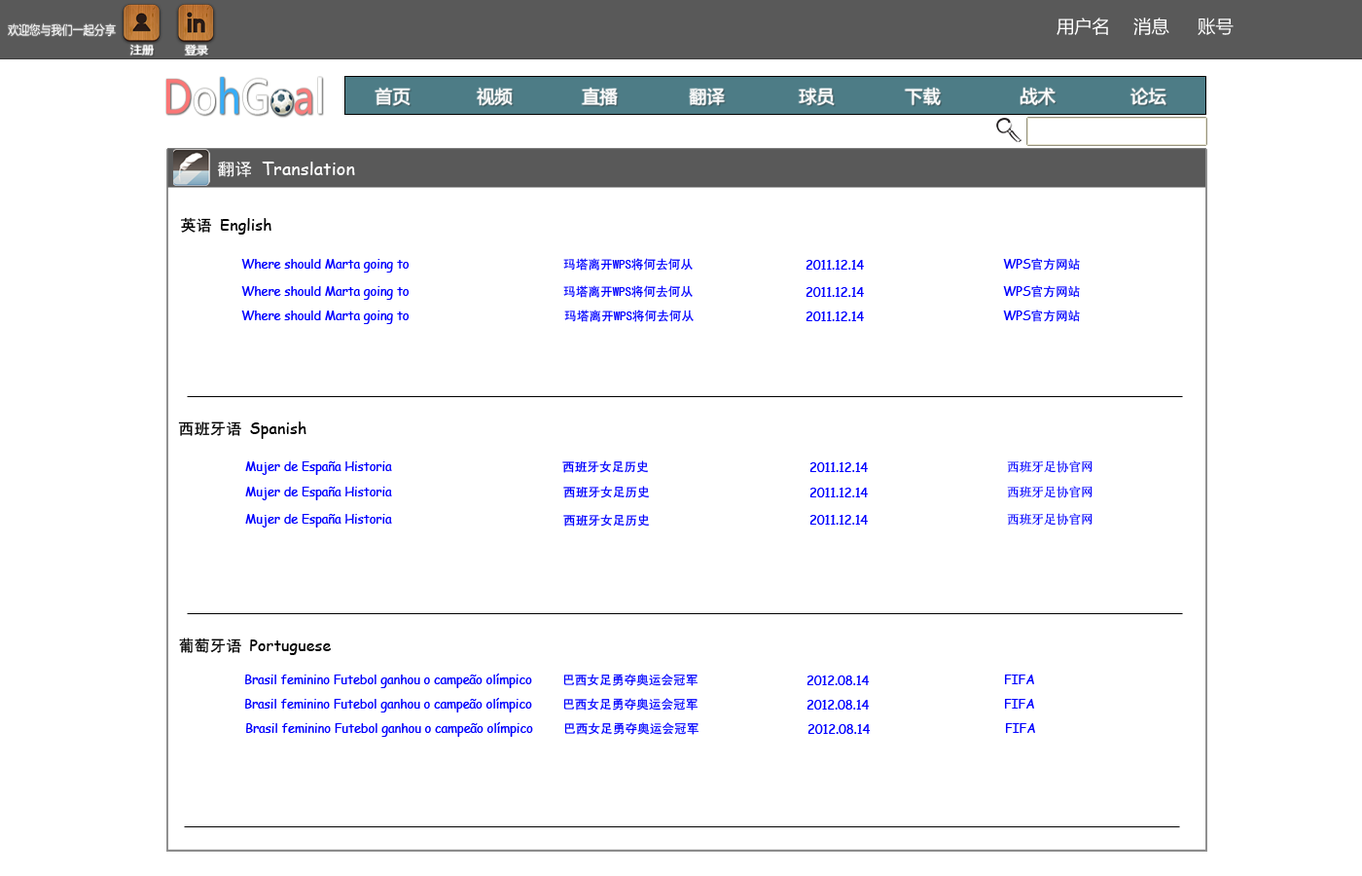
<style>
.page{position:relative;width:1362px;height:876px;background:#ffffff}
.page>*{position:absolute;margin:0}
.t1{font:17.8px "MicrosoftYaHei";color:#ffffff}
.t2{font:12.4px "MicrosoftYaHei";color:#ffffff;scale:0.87 1}
.t3{font:11px "MicrosoftYaHei";color:#ffffff;scale:1.05 1}
.t4{font:17.8px "ComicSansMS";color:#ffffff}
.t5{font:17.8px "SimHei";color:#ffffff}
.t6{font:15.8px "ComicSansMS";color:#000000}
.t7{font:15.8px "SimHei";color:#000000}
.t8{font:12.3px "SimHei";color:#0000ff}
.t9{font:12.3px "ComicSansMS";color:#0000ff}
.t10{font:12.3px "SimSun";color:#0000ff}
</style>
<div class="page">
<p class="t1" style="left:1056px;top:18px;width:52px;height:17px">用户名</p>
<p class="t1" style="left:1133px;top:18px;width:36px;height:17px">消息</p>
<p class="t1" style="left:1198px;top:18px;width:36px;height:17px">账号</p>
<p class="t2" style="left:8px;top:23px;width:108px;height:14px">欢迎您与我们一起分享</p>
<p class="t3" style="left:130px;top:44px;width:24px;height:11px">注册</p>
<p class="t3" style="left:185px;top:45px;width:23px;height:10px">登录</p>
<p class="t1" style="left:375px;top:88px;width:36px;height:18px">首页</p>
<p class="t1" style="left:477px;top:88px;width:36px;height:18px">视频</p>
<p class="t1" style="left:582px;top:88px;width:36px;height:18px">直播</p>
<p class="t1" style="left:689px;top:88px;width:36px;height:17px">翻译</p>
<p class="t1" style="left:799px;top:88px;width:36px;height:17px">球员</p>
<p class="t1" style="left:905px;top:88px;width:36px;height:17px">下载</p>
<p class="t1" style="left:1020px;top:88px;width:36px;height:17px">战术</p>
<p class="t1" style="left:1130px;top:88px;width:36px;height:17px">论坛</p>
<p class="t4" style="left:217px;top:161px;width:138px;height:16px"><span class="t5">翻译 </span>Translation</p>
<p class="t6" style="left:181px;top:217px;width:90px;height:17px"><span class="t7">英语 </span>English</p>
<p class="t8" style="left:563px;top:258px;width:130px;height:12px">玛塔离开WPS将何去何从</p>
<p class="t8" style="left:1003px;top:258px;width:77px;height:12px"><span class="t9">WPS</span>官方网站</p>
<p class="t9" style="left:241px;top:259px;width:168px;height:13px">Where should Marta going to</p>
<p class="t9" style="left:805px;top:260px;width:59px;height:9px">2011.12.14</p>
<p class="t9" style="left:241px;top:286px;width:168px;height:14px">Where should Marta going to</p>
<p class="t8" style="left:563px;top:285px;width:130px;height:13px">玛塔离开WPS将何去何从</p>
<p class="t9" style="left:805px;top:287px;width:59px;height:10px">2011.12.14</p>
<p class="t8" style="left:1003px;top:285px;width:77px;height:13px"><span class="t9">WPS</span>官方网站</p>
<p class="t9" style="left:241px;top:310px;width:168px;height:14px">Where should Marta going to</p>
<p class="t8" style="left:564px;top:309px;width:130px;height:13px">玛塔离开WPS将何去何从</p>
<p class="t9" style="left:805px;top:311px;width:59px;height:10px">2011.12.14</p>
<p class="t8" style="left:1003px;top:309px;width:77px;height:13px"><span class="t9">WPS</span>官方网站</p>
<p class="t6" style="left:178px;top:421px;width:128px;height:18px"><span class="t7">西班牙语 </span>Spanish</p>
<p class="t9" style="left:245px;top:461px;width:147px;height:14px">Mujer de España Historia</p>
<p class="t8" style="left:562px;top:460px;width:86px;height:13px">西班牙女足历史</p>
<p class="t10" style="left:1007px;top:460px;width:85px;height:13px">西班牙足协官网</p>
<p class="t9" style="left:809px;top:462px;width:59px;height:10px">2011.12.14</p>
<p class="t8" style="left:563px;top:485px;width:86px;height:13px">西班牙女足历史</p>
<p class="t10" style="left:1007px;top:485px;width:85px;height:13px">西班牙足协官网</p>
<p class="t9" style="left:245px;top:486px;width:147px;height:14px">Mujer de España Historia</p>
<p class="t9" style="left:809px;top:487px;width:59px;height:10px">2011.12.14</p>
<p class="t9" style="left:245px;top:514px;width:147px;height:13px">Mujer de España Historia</p>
<p class="t8" style="left:563px;top:514px;width:86px;height:12px">西班牙女足历史</p>
<p class="t9" style="left:809px;top:515px;width:59px;height:9px">2011.12.14</p>
<p class="t10" style="left:1007px;top:513px;width:85px;height:12px">西班牙足协官网</p>
<p class="t6" style="left:179px;top:637px;width:152px;height:18px"><span class="t7">葡萄牙语 </span>Portuguese</p>
<p class="t9" style="left:245px;top:673px;width:287px;height:15px">Brasil feminino Futebol ganhou o campeão olímpico</p>
<p class="t8" style="left:563px;top:673px;width:135px;height:13px">巴西女足勇夺奥运会冠军</p>
<p class="t9" style="left:806px;top:675px;width:64px;height:10px">2012.08.14</p>
<p class="t9" style="left:1005px;top:674px;width:29px;height:10px">FIFA</p>
<p class="t9" style="left:245px;top:698px;width:287px;height:14px">Brasil feminino Futebol ganhou o campeão olímpico</p>
<p class="t8" style="left:563px;top:698px;width:135px;height:12px">巴西女足勇夺奥运会冠军</p>
<p class="t9" style="left:806px;top:699px;width:64px;height:10px">2012.08.14</p>
<p class="t9" style="left:1005px;top:698px;width:29px;height:10px">FIFA</p>
<p class="t9" style="left:246px;top:722px;width:287px;height:14px">Brasil feminino Futebol ganhou o campeão olímpico</p>
<p class="t8" style="left:564px;top:722px;width:134px;height:12px">巴西女足勇夺奥运会冠军</p>
<p class="t9" style="left:807px;top:724px;width:64px;height:10px">2012.08.14</p>
<p class="t9" style="left:1006px;top:723px;width:29px;height:10px">FIFA</p>
</div>
